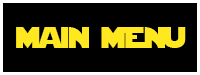
<style>
.page{position:relative;width:200px;height:75px;background:#000000}
.page>*{position:absolute;margin:0}
.t1{font:30px "StarJediSpecialEdition";letter-spacing:-0.025em;color:#ffe81f}
</style>
<div class="page">
<p class="t1" style="left:16px;top:27px;width:170px;height:21px">main mEnu</p>
</div>
